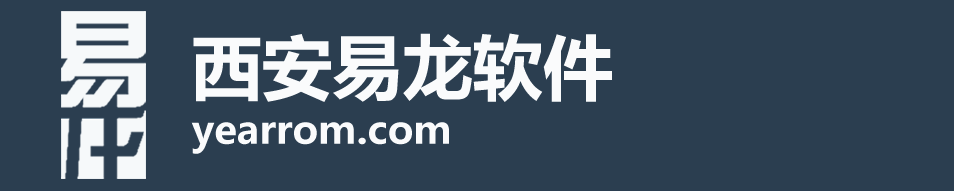
<style>
.page{position:relative;width:954px;height:191px;background:#2b3e50}
.page>*{position:absolute;margin:0}
.t1{font:70.2px "MicrosoftYaHei-Bold";color:#fafbfc}
.t2{font:39px "MicrosoftYaHei-Bold";color:#fafbfc}
</style>
<div class="page">
<p class="t1" style="left:193px;top:33px;width:419px;height:69px">西安易龙软件</p>
<p class="t2" style="left:191px;top:122px;width:258px;height:32px">yearrom.com</p>
</div>
